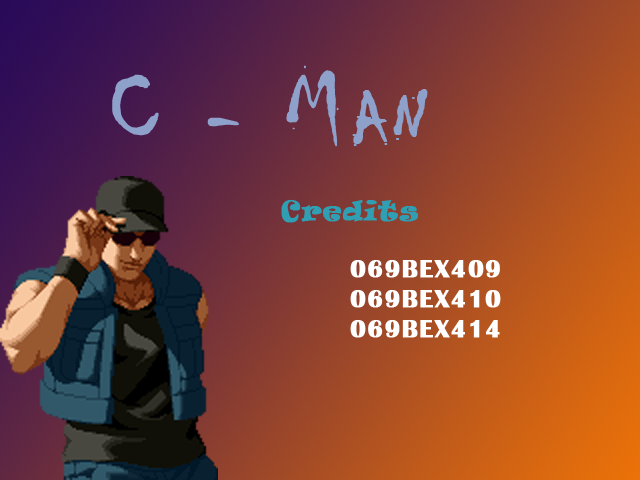
<style>
.page{position:relative;width:640px;height:480px}
.page>*{position:absolute;margin:0}
.t1{font:103.1px "Chiller-Regular";letter-spacing:0.05em;color:#8ea1cb;font-variant:small-caps;font-weight:bold}
.t2{font:25px "BritannicBold";letter-spacing:0.05em;color:#ffffff;font-variant:small-caps;font-weight:bold}
.t3{font:25px "Ravie";letter-spacing:0.05em;color:#309fb3;font-weight:bold}
</style>
<div class="page">
<p class="t1" style="left:112px;top:65px;width:316px;height:82px">C - Man</p>
<p class="t2" style="left:281px;top:200px;width:220px;height:138px;text-align:center"><span class="t3">Credits<br><br></span>069BEX409<br>069BEX410<br>069BEX414</p>
</div>
